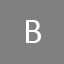
<style>
.page{position:relative;width:64px;height:64px;background:#808080}
.page>*{position:absolute;margin:0}
.t1{font:36px "Calibri";color:#feffff}
</style>
<div class="page">
<p class="t1" style="left:26px;top:20px;width:15px;height:23px">B</p>
</div>
